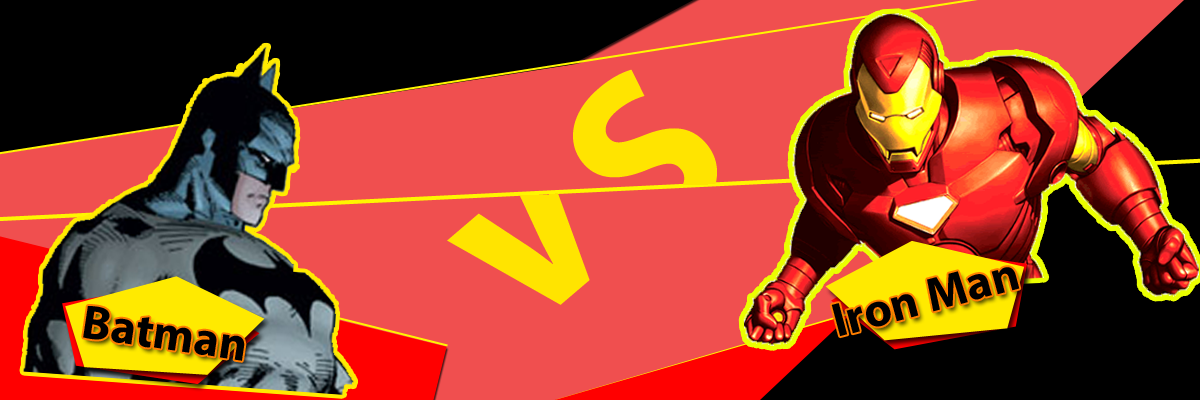
<style>
.page{position:relative;width:1200px;height:400px;background:#f04f4f}
.page>*{position:absolute;margin:0}
.t1{font:48px "MyriadPro-Bold";color:#000000}
</style>
<div class="page">
<p class="t1" style="left:831px;top:267px;width:189px;height:70px;rotate:-15deg">Iron Man</p>
<p class="t1" style="left:83px;top:306px;width:162px;height:55px;rotate:9deg">Batman</p>
</div>
